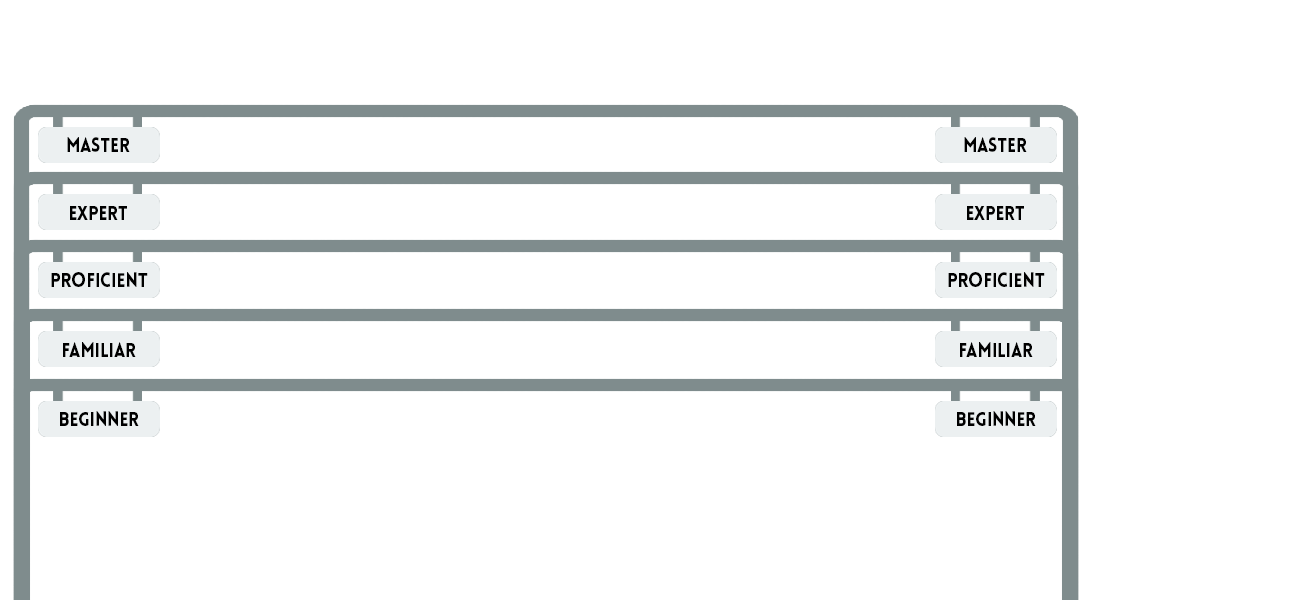
<style>
.page{position:relative;width:1300px;height:600px;background:#ffffff}
.page>*{position:absolute;margin:0}
.t1{font:20px "LoveloBlack";color:#000000;scale:0.87 1}
.t2{font:20px "LoveloBlack";color:#000000;scale:0.89 1}
</style>
<div class="page">
<p class="t1" style="left:67px;top:137px;width:63px;height:15px">master</p>
<p class="t1" style="left:964px;top:137px;width:63px;height:15px">master</p>
<p class="t1" style="left:70px;top:206px;width:57px;height:14px">expert</p>
<p class="t1" style="left:967px;top:206px;width:57px;height:14px">expert</p>
<p class="t2" style="left:51px;top:272px;width:97px;height:15px">PROFICIENT</p>
<p class="t2" style="left:948px;top:272px;width:97px;height:15px">PROFICIENT</p>
<p class="t1" style="left:63px;top:342px;width:73px;height:15px">FAMILIAR</p>
<p class="t1" style="left:960px;top:342px;width:73px;height:15px">FAMILIAR</p>
<p class="t1" style="left:60px;top:411px;width:79px;height:15px">BEGINNER</p>
<p class="t1" style="left:957px;top:411px;width:79px;height:15px">BEGINNER</p>
</div>
